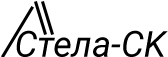
<style>
.page{position:relative;width:168px;height:57px;background:#ffffff}
.page>*{position:absolute;margin:0}
.t1{font:36px "Roboto-Italic";color:#000000}
</style>
<div class="page">
<p class="t1" style="left:16px;top:30px;width:152px;height:27px">Стела-CK</p>
</div>
